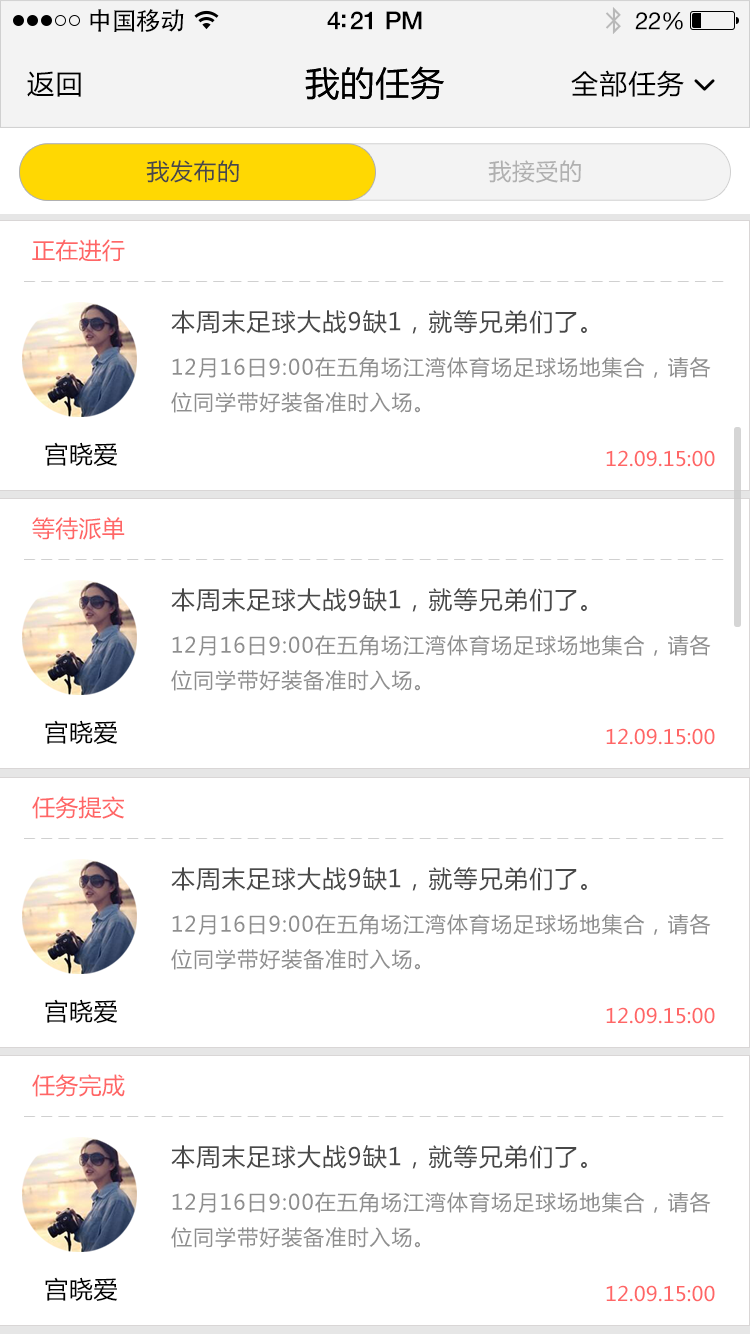
<style>
.page{position:relative;width:750px;height:1334px;background:#ffffff}
.page>*{position:absolute;margin:0}
.t1{font:25px "AdobeHeitiStd-Regular";letter-spacing:-0.025em;color:#000000}
.t2{font:25px "HelveticaNeue-Medium";letter-spacing:-0.02em;color:#000000}
.t3{font:24px "HelveticaNeue";letter-spacing:-0.02em;color:#000000}
.t4{font:27px "MicrosoftYaHei";letter-spacing:0.05em;color:#000000}
.t5{font:34px "MicrosoftYaHei";letter-spacing:0.03em;color:#000000}
.t6{font:23px "MicrosoftYaHei";letter-spacing:0.03em;color:#484848}
.t7{font:23px "MicrosoftYaHei";letter-spacing:0.03em;color:#b0b0b0}
.t8{font:23px "MicrosoftYaHei";letter-spacing:0.01em;color:#ff6666}
.t9{font:24px "MicrosoftYaHei";letter-spacing:0.05em;color:#555555}
.t10{font:21px/35px "MicrosoftYaHei";letter-spacing:0.05em;color:#8e8e8e}
.t11{font:24px "MicrosoftYaHei";letter-spacing:0.03em;color:#000000}
.t12{font:20px "MicrosoftYaHei";letter-spacing:0.01em;color:#ff6666}
</style>
<div class="page">
<p class="t1" style="left:90px;top:9px;width:94px;height:23px">中国移动</p>
<p class="t2" style="left:327px;top:11px;width:95px;height:19px">4:21 PM</p>
<p class="t3" style="left:635px;top:12px;width:48px;height:18px">22%</p>
<p class="t4" style="left:27px;top:71px;width:54px;height:26px">返回</p>
<p class="t5" style="left:305px;top:66px;width:139px;height:34px">我的任务</p>
<p class="t5" style="left:305px;top:66px;width:139px;height:34px">我的任务</p>
<p class="t4" style="left:571px;top:70px;width:113px;height:27px">全部任务</p>
<p class="t6" style="left:146px;top:160px;width:93px;height:23px">我发布的</p>
<p class="t7" style="left:488px;top:160px;width:93px;height:23px">我接受的</p>
<p class="t8" style="left:32px;top:239px;width:93px;height:23px">正在进行</p>
<p class="t9" style="left:171px;top:310px;width:416px;height:24px">本周末足球大战9缺1，就等兄弟们了。</p>
<p class="t10" style="left:171px;top:357px;width:540px;height:56px">12月16日9:00在五角场江湾体育场足球场地集合，请各<br>位同学带好装备准时入场。</p>
<p class="t11" style="left:45px;top:442px;width:73px;height:24px">宫晓爱</p>
<p class="t12" style="left:606px;top:450px;width:109px;height:17px">12.09.15:00</p>
<p class="t8" style="left:32px;top:517px;width:93px;height:23px">等待派单</p>
<p class="t9" style="left:171px;top:588px;width:416px;height:24px">本周末足球大战9缺1，就等兄弟们了。</p>
<p class="t10" style="left:171px;top:635px;width:540px;height:56px">12月16日9:00在五角场江湾体育场足球场地集合，请各<br>位同学带好装备准时入场。</p>
<p class="t11" style="left:45px;top:720px;width:73px;height:24px">宫晓爱</p>
<p class="t12" style="left:606px;top:728px;width:109px;height:17px">12.09.15:00</p>
<p class="t8" style="left:32px;top:796px;width:92px;height:23px">任务提交</p>
<p class="t9" style="left:171px;top:867px;width:416px;height:24px">本周末足球大战9缺1，就等兄弟们了。</p>
<p class="t10" style="left:171px;top:914px;width:540px;height:56px">12月16日9:00在五角场江湾体育场足球场地集合，请各<br>位同学带好装备准时入场。</p>
<p class="t11" style="left:45px;top:999px;width:73px;height:24px">宫晓爱</p>
<p class="t12" style="left:606px;top:1007px;width:109px;height:17px">12.09.15:00</p>
<p class="t8" style="left:32px;top:1074px;width:93px;height:23px">任务完成</p>
<p class="t9" style="left:171px;top:1145px;width:416px;height:24px">本周末足球大战9缺1，就等兄弟们了。</p>
<p class="t10" style="left:171px;top:1192px;width:540px;height:56px">12月16日9:00在五角场江湾体育场足球场地集合，请各<br>位同学带好装备准时入场。</p>
<p class="t11" style="left:45px;top:1277px;width:73px;height:24px">宫晓爱</p>
<p class="t12" style="left:606px;top:1285px;width:109px;height:17px">12.09.15:00</p>
</div>
